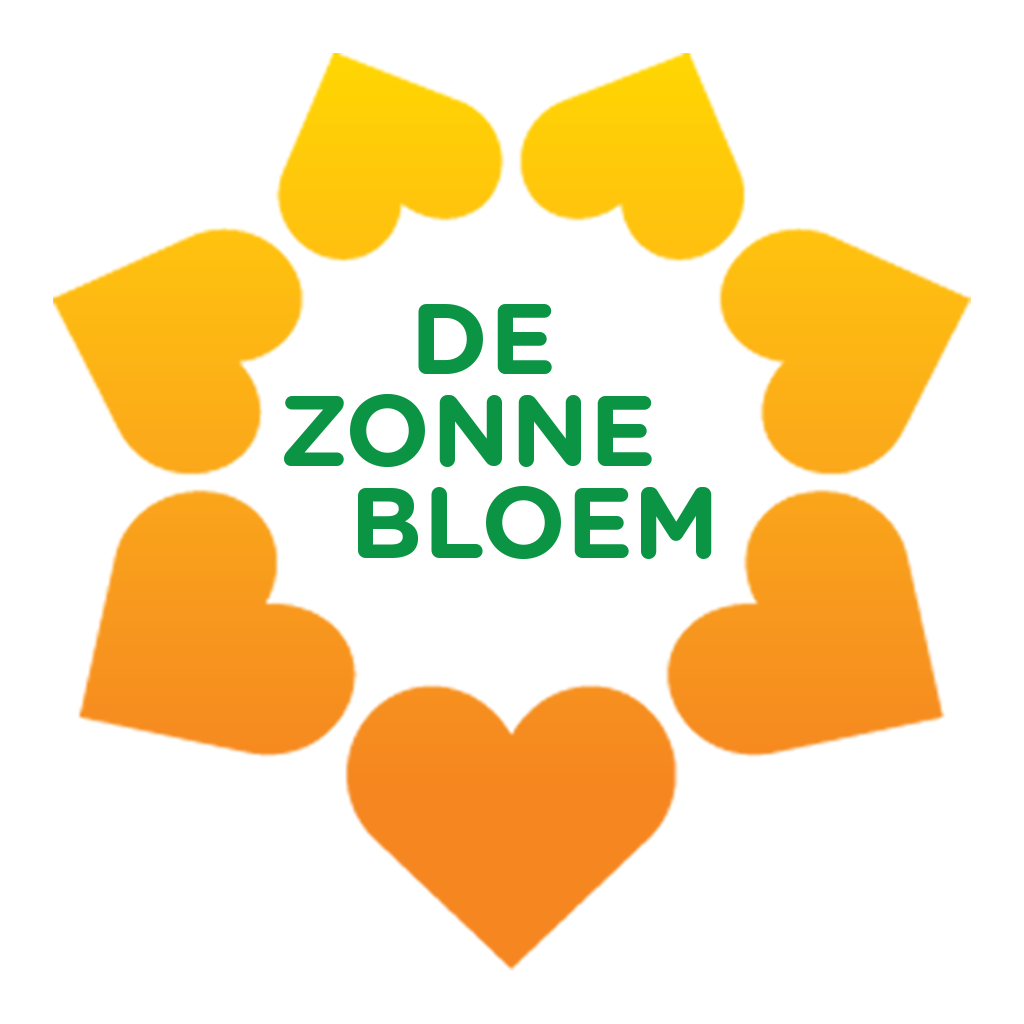
<style>
.page{position:relative;width:1024px;height:1024px;background:#ffffff}
.page>*{position:absolute;margin:0}
.t1{font:100.2px/91.9px "GothamRounded-Bold";color:#0b9444}
</style>
<div class="page">
<p class="t1" style="left:284px;top:304px;width:428px;height:255px">DE<br>ZONNE<br> BLOEM</p>
</div>
